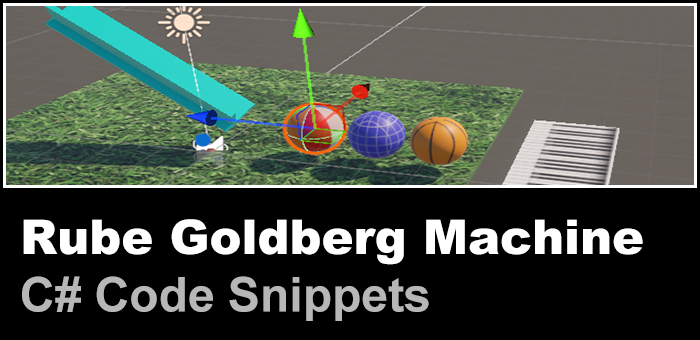
<style>
.page{position:relative;width:700px;height:340px;background:#000000}
.page>*{position:absolute;margin:0}
.t1{font:48px "Arial-Black";color:#ffffff}
.t2{font:48px "Arial-BoldMT";color:#b7b7b7}
</style>
<div class="page">
<p class="t1" style="left:22px;top:219px;width:621px;height:102px">Rube Goldberg Machine<br><span class="t2">C# Code Snippets</span></p>
</div>
